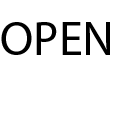
<style>
.page{position:relative;width:128px;height:128px;background:#ffffff}
.page>*{position:absolute;margin:0}
.t1{font:48px "MyriadPro-Regular";color:#000000}
</style>
<div class="page">
<p class="t1" style="left:1px;top:22px;width:109px;height:33px">OPEN</p>
</div>
